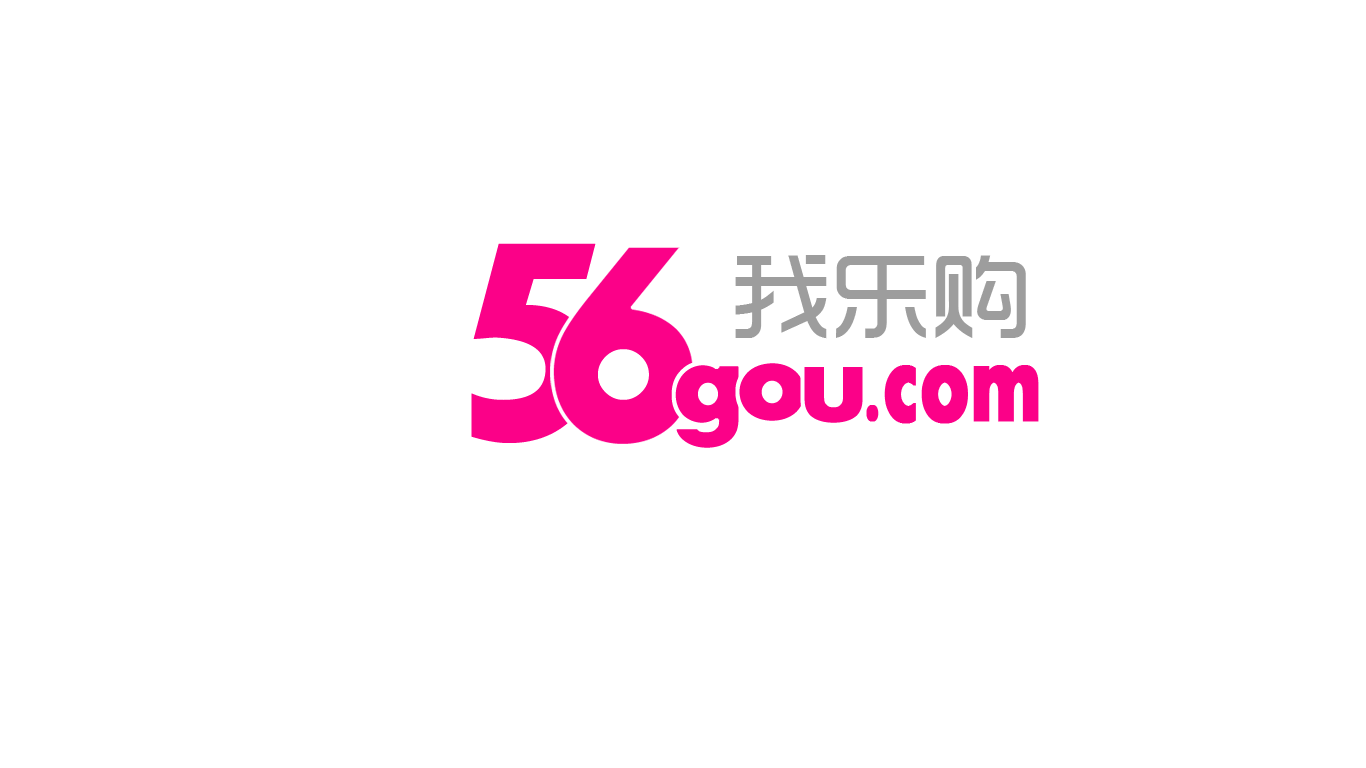
<style>
.page{position:relative;width:1366px;height:768px;background:#ffffff}
.page>*{position:absolute;margin:0}
.t1{font:427.6px "Aharoni-Bold";color:#fb0188}
.t2{font:100px "TRENDS";color:#9d9d9d}
.t3{font:120px "Aharoni-Bold";color:#fb0188;font-weight:bold}
.t4{font:119px "Aharoni-Bold";color:#fb0188;font-weight:bold;scale:0.67 1}
</style>
<div class="page">
<p class="t1" style="left:471px;top:243px;width:125px;height:200px">5</p>
<p class="t1" style="left:552px;top:245px;width:143px;height:200px">6</p>
<p class="t2" style="left:735px;top:255px;width:291px;height:84px">我乐购</p>
<p class="t3" style="left:673px;top:363px;width:68px;height:87px">g</p>
<p class="t3" style="left:737px;top:361px;width:70px;height:62px">o</p>
<p class="t3" style="left:802px;top:365px;width:63px;height:60px">u</p>
<p class="t4" style="left:866px;top:365px;width:173px;height:59px">.com</p>
</div>
